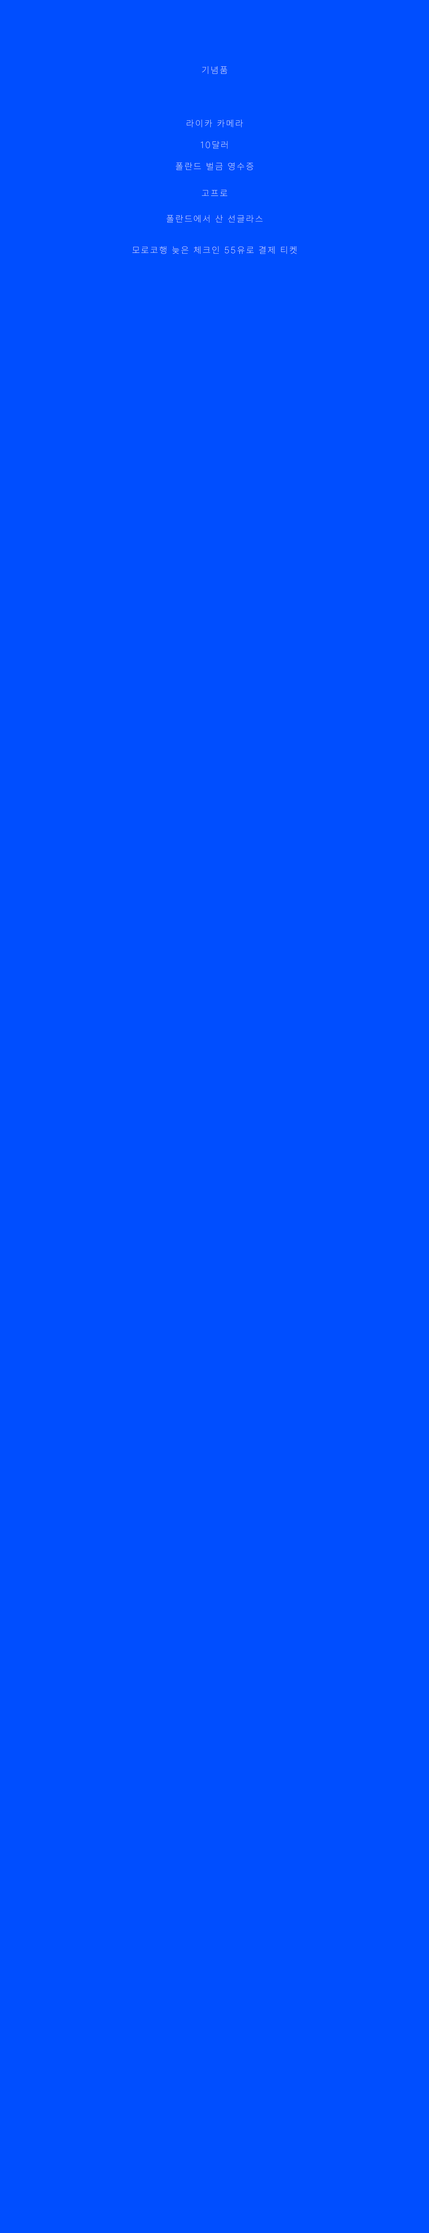
<style>
.page{position:relative;width:429px;height:2233px;background:#004eff}
.page>*{position:absolute;margin:0}
.t1{font:9px "Pretendard-Thin";letter-spacing:0.15em;color:#ffffff}
</style>
<div class="page">
<p class="t1" style="left:202px;top:66px;width:25px;height:8px">기념품</p>
<p class="t1" style="left:186px;top:119px;width:57px;height:8px">라이카 카메라</p>
<p class="t1" style="left:201px;top:141px;width:26px;height:8px">10달러</p>
<p class="t1" style="left:176px;top:162px;width:77px;height:8px">폴란드 벌금 영수증</p>
<p class="t1" style="left:202px;top:190px;width:25px;height:6px">고프로</p>
<p class="t1" style="left:166px;top:215px;width:97px;height:8px">폴란드에서 산 선글라스</p>
<p class="t1" style="left:132px;top:246px;width:165px;height:8px">모로코행 늦은 체크인 55유로 결제 티켓</p>
</div>
